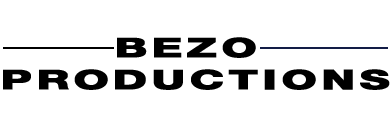
<style>
.page{position:relative;width:391px;height:133px;background:#ffffff}
.page>*{position:absolute;margin:0}
.t1{font:27px/31.9px "HelveticaNeueBold";letter-spacing:0.075em;color:#000000;text-transform:uppercase;font-weight:bold;scale:1.67 1}
</style>
<div class="page">
<p class="t1" style="left:3px;top:37px;width:387px;height:53px;text-align:center">BEZO <br>PRODUCTIONS</p>
</div>
